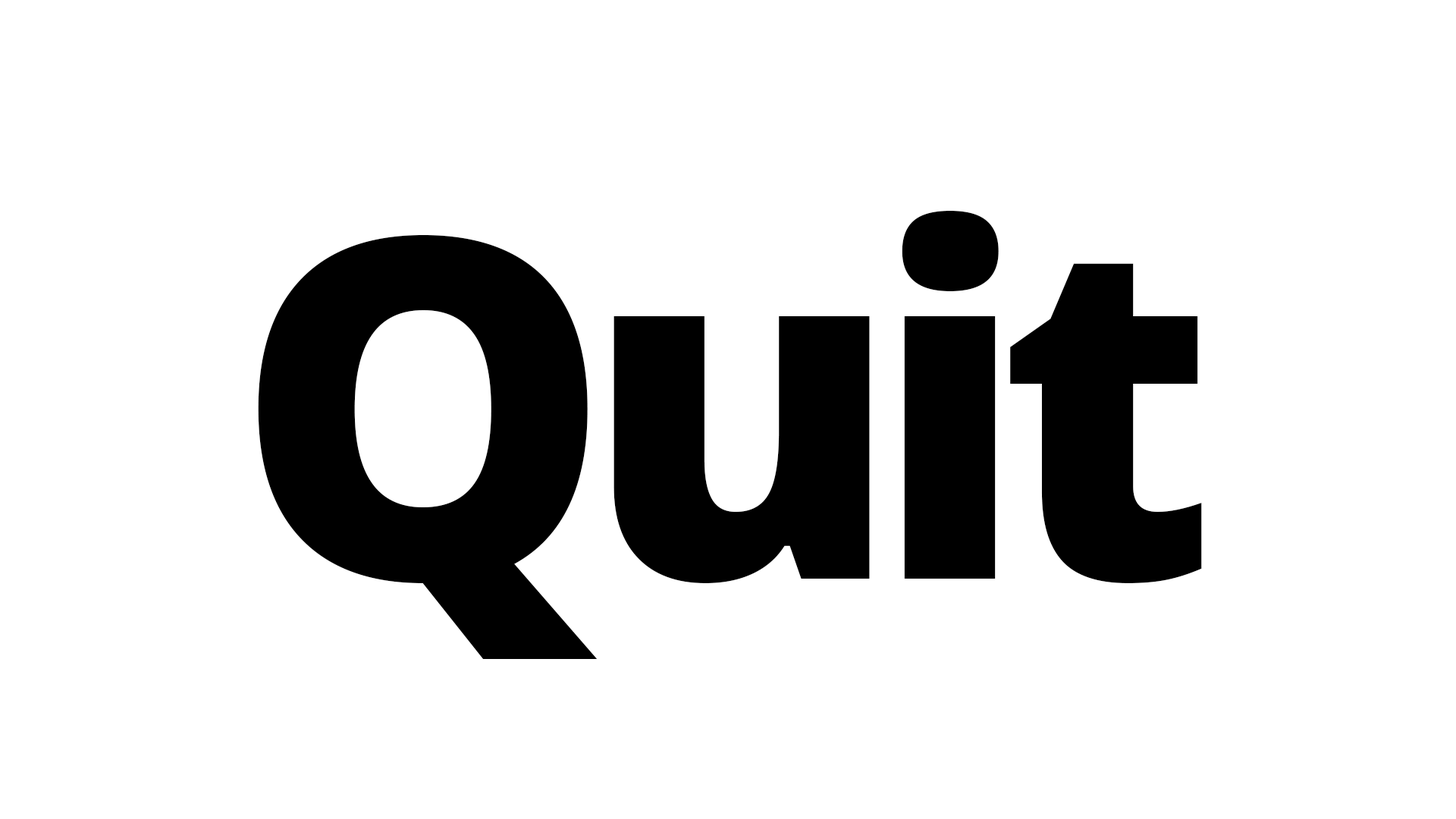
<style>
.page{position:relative;width:1456px;height:819px;background:#ffffff}
.page>*{position:absolute;margin:0}
.t1{font:474px "OpenSans-ExtraBold";letter-spacing:-0.06em;color:#000000}
</style>
<div class="page">
<p class="t1" style="left:258px;top:211px;width:944px;height:448px">Quit</p>
</div>
